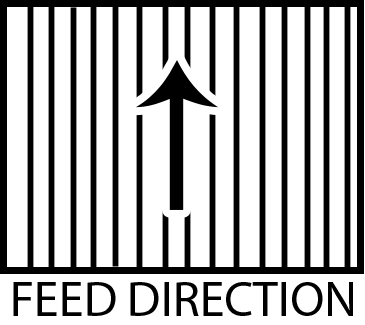
<style>
.page{position:relative;width:365px;height:325px;background:#ffffff}
.page>*{position:absolute;margin:0}
.t1{font:50px "MyriadPro-Regular";color:#000000}
</style>
<div class="page">
<p class="t1" style="left:13px;top:282px;width:340px;height:34px">FEED DIRECTION</p>
</div>
